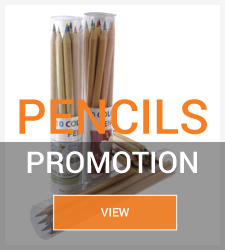
<style>
.page{position:relative;width:225px;height:250px;background:#ffffff}
.page>*{position:absolute;margin:0}
.t1{font:48px "Roboto-Medium";color:#f67f24}
.t2{font:30px "Roboto-Medium";color:#ffffff}
.t3{font:12px "Roboto-Medium";color:#ffffff}
</style>
<div class="page">
<p class="t1" style="left:19px;top:99px;width:188px;height:36px">PENCILS</p>
<p class="t2" style="left:27px;top:151px;width:170px;height:23px">PROMOTION</p>
<p class="t3" style="left:100px;top:208px;width:29px;height:9px">VIEW</p>
</div>
